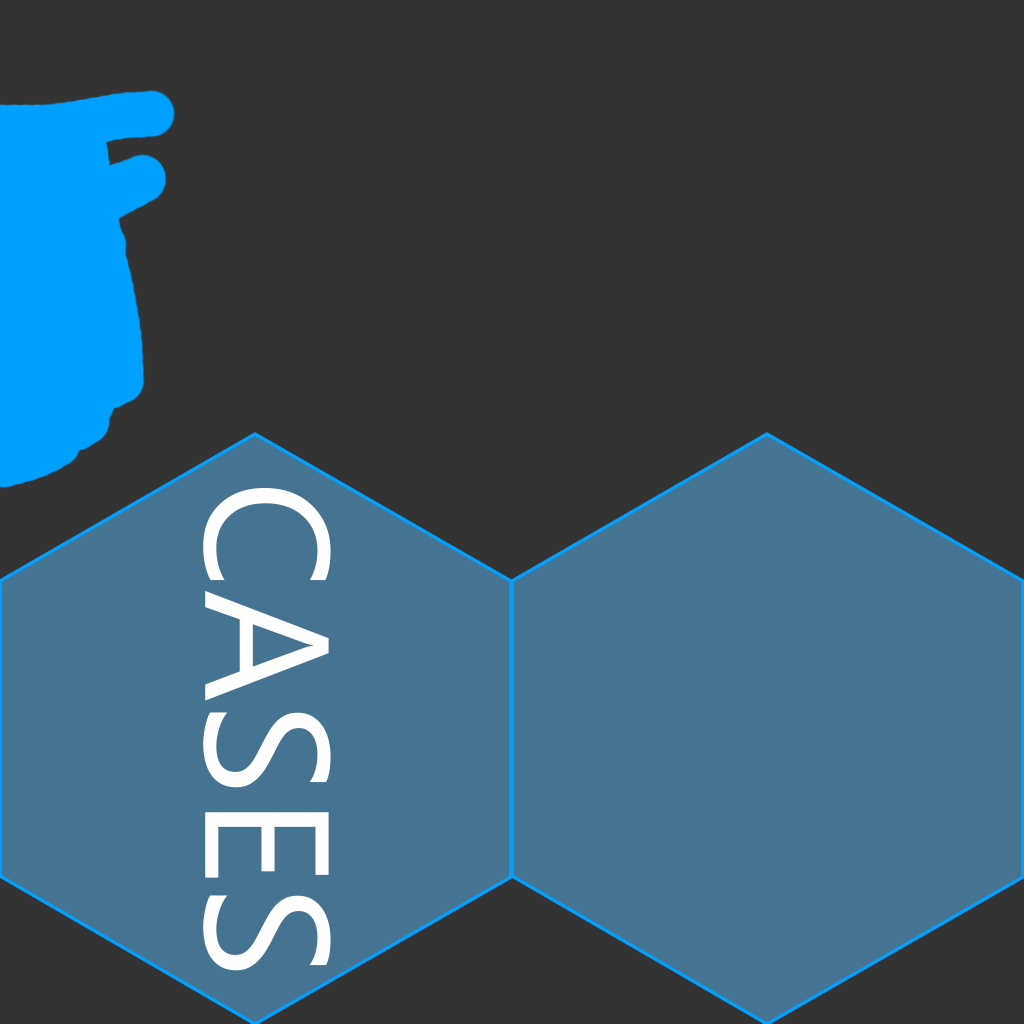
<style>
.page{position:relative;width:1024px;height:1024px;background:#333333}
.page>*{position:absolute;margin:0}
.t1{font:176px "SegoeUI";color:#ffffff}
</style>
<div class="page">
<p class="t1" style="left:203px;top:488px;width:128px;height:483px;rotate:90deg">CASES</p>
</div>
